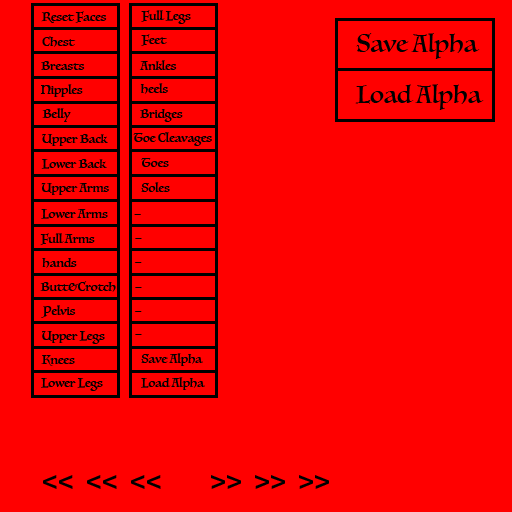
<style>
.page{position:relative;width:512px;height:512px;background:#ff0000}
.page>*{position:absolute;margin:0}
.t1{font:12px "Luminari-Regular";color:#000000}
.t2{font:24px "Luminari-Regular";color:#000000}
.t3{font:24px "BlackoakStd";color:#000000}
</style>
<div class="page">
<p class="t1" style="left:41px;top:11px;width:66px;height:12px">Reset Faces</p>
<p class="t1" style="left:141px;top:10px;width:50px;height:14px">Full Legs</p>
<p class="t1" style="left:42px;top:36px;width:34px;height:11px">Chest</p>
<p class="t1" style="left:141px;top:34px;width:26px;height:12px">Feet</p>
<p class="t2" style="left:356px;top:33px;width:124px;height:26px">Save Alpha</p>
<p class="t1" style="left:41px;top:61px;width:44px;height:9px">Breasts</p>
<p class="t1" style="left:139px;top:60px;width:38px;height:10px">Ankles</p>
<p class="t1" style="left:40px;top:84px;width:43px;height:13px">Nipples</p>
<p class="t1" style="left:140px;top:83px;width:28px;height:11px">heels</p>
<p class="t2" style="left:355px;top:84px;width:129px;height:26px">Load Alpha</p>
<p class="t1" style="left:42px;top:108px;width:29px;height:14px">Belly</p>
<p class="t1" style="left:140px;top:109px;width:43px;height:13px">Bridges</p>
<p class="t1" style="left:42px;top:134px;width:66px;height:12px">Upper Back</p>
<p class="t1" style="left:133px;top:132px;width:79px;height:14px">Toe Cleavages</p>
<p class="t1" style="left:41px;top:159px;width:66px;height:10px">Lower Back</p>
<p class="t1" style="left:141px;top:158px;width:28px;height:9px">Toes</p>
<p class="t1" style="left:41px;top:183px;width:68px;height:12px">Upper Arms</p>
<p class="t1" style="left:141px;top:182px;width:29px;height:10px">Soles</p>
<p class="t1" style="left:41px;top:209px;width:67px;height:10px">Lower Arms</p>
<p class="t1" style="left:40px;top:233px;width:55px;height:12px">Full Arms</p>
<p class="t1" style="left:42px;top:258px;width:35px;height:10px">hands</p>
<p class="t1" style="left:40px;top:281px;width:76px;height:11px">Butt&amp;Crotch</p>
<p class="t1" style="left:41px;top:305px;width:35px;height:13px">Pelvis</p>
<p class="t1" style="left:42px;top:331px;width:63px;height:13px">Upper Legs</p>
<p class="t1" style="left:141px;top:353px;width:62px;height:13px">Save Alpha</p>
<p class="t1" style="left:41px;top:355px;width:34px;height:11px">Knees</p>
<p class="t1" style="left:141px;top:377px;width:64px;height:13px">Load Alpha</p>
<p class="t1" style="left:41px;top:378px;width:62px;height:13px">Lower Legs</p>
<p class="t3" style="left:43px;top:475px;width:286px;height:14px">&lt;&lt; &lt;&lt; &lt;&lt;    &gt;&gt; &gt;&gt; &gt;&gt;</p>
</div>
